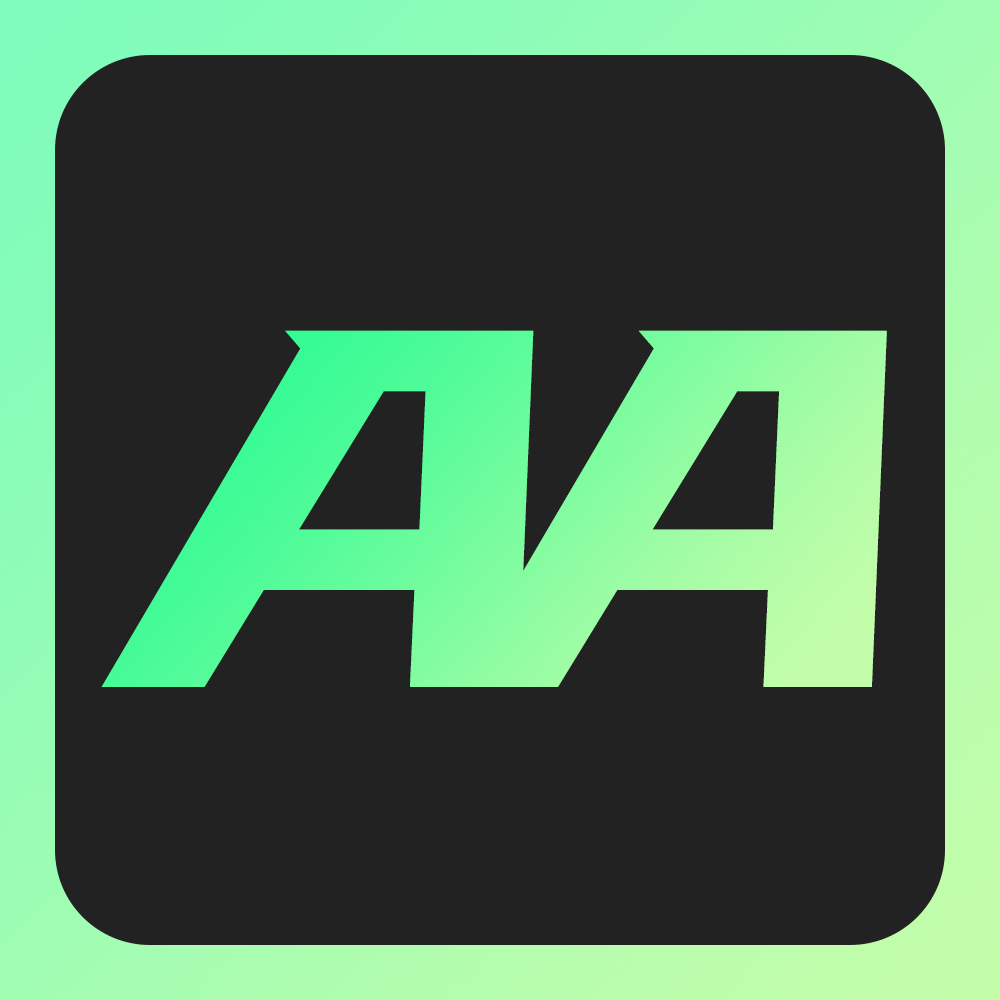
<style>
.page{position:relative;width:1000px;height:1000px;background:#222222}
.page>*{position:absolute;margin:0}
.t1{font:629.1px "YouSheBiaoTiHei";letter-spacing:-0.186em;font-style:italic}
</style>
<div class="page">
<p class="t1" style="left:101px;top:330px;width:786px;height:357px">AA</p>
</div>
